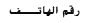
<style>
.page{position:relative;width:90px;height:23px;background:#ffffff}
.page>*{position:absolute;margin:0}
.t1{font:12px "BoutrosAdsMedium";color:#0c0b0b}
</style>
<div class="page">
<p class="t1" style="left:9px;top:5px;width:71px;height:13px">رقم الهاتــف</p>
</div>
